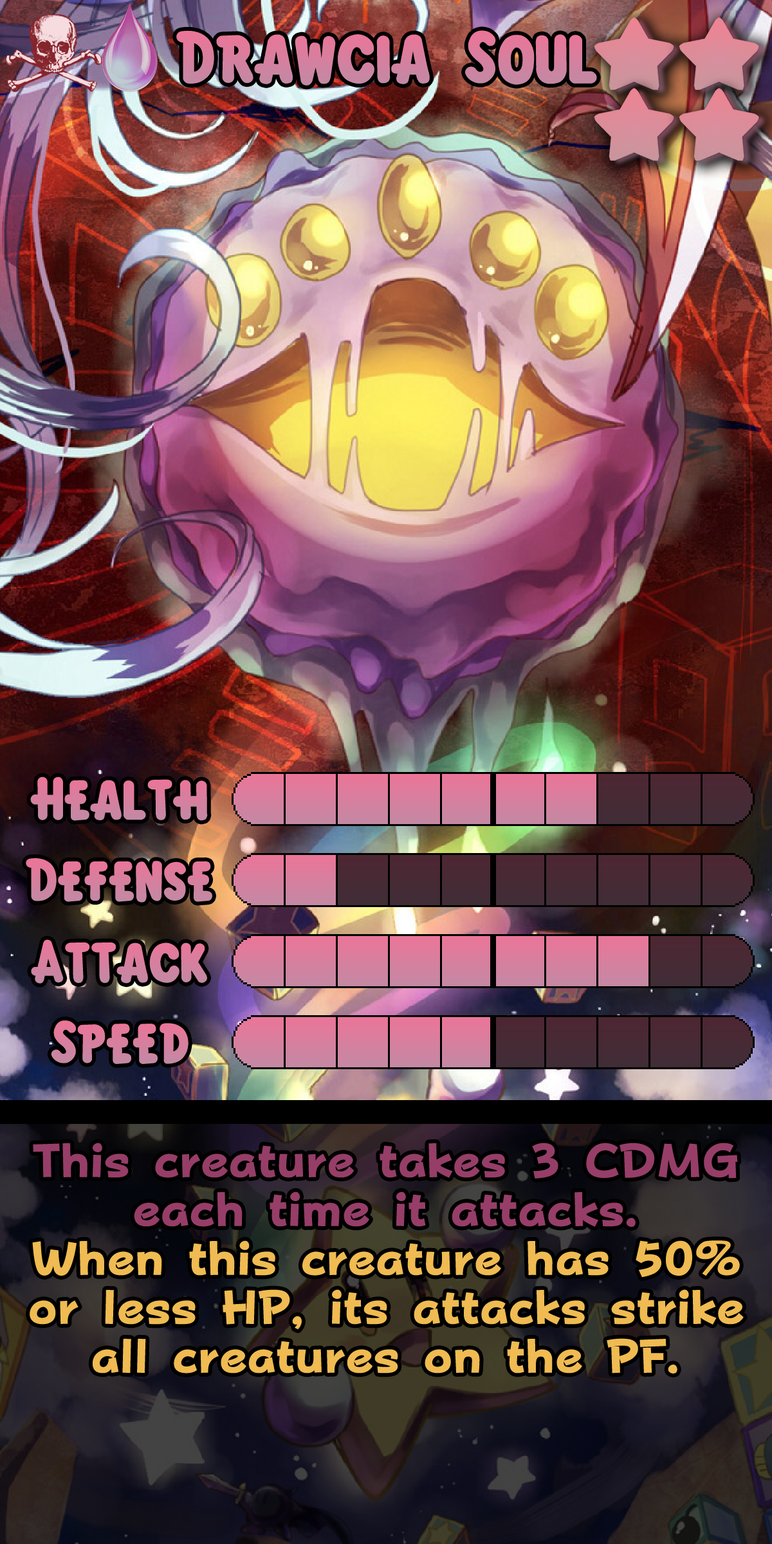
<style>
.page{position:relative;width:772px;height:1544px}
.page>*{position:absolute;margin:0}
.t1{font:114.5px "KirbyClassic";color:#d5809e}
.t2{font:92.7px "KirbyClassic";color:#d6809e}
.t3{font:92.7px "KirbyClassic";color:#d77f9e}
.t4{font:92.7px "KirbyClassic";color:#d87f9e}
.t5{font:81.1px/48.9px "FOTPopHappinessStrp-ExtraBold";color:#efbb52}
.t6{font:81.1px/48.9px "FOTPopHappinessStrp-ExtraBold";color:#963e68}
</style>
<div class="page">
<p class="t1" style="left:176px;top:30px;width:421px;height:56px">Drawcia Soul</p>
<p class="t2" style="left:30px;top:777px;width:178px;height:44px">Health</p>
<p class="t3" style="left:26px;top:858px;width:186px;height:45px">Defense</p>
<p class="t2" style="left:31px;top:939px;width:176px;height:45px">Attack</p>
<p class="t4" style="left:51px;top:1021px;width:138px;height:43px">Speed</p>
<p class="t5" style="left:30px;top:1143px;width:714px;height:231px;text-align:center"><span class="t6">This creature takes 3 CDMG each time it attacks.<br></span>When this creature has 50% or less HP, its attacks strike all creatures on the PF.</p>
</div>
